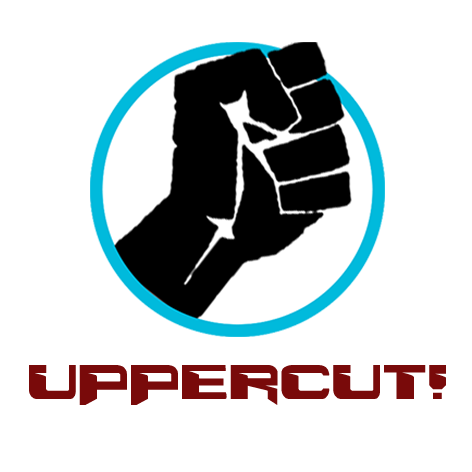
<style>
.page{position:relative;width:472px;height:472px;background:#ffffff}
.page>*{position:absolute;margin:0}
.t1{font:53.7px "Interdiction";color:#790a0a}
</style>
<div class="page">
<p class="t1" style="left:29px;top:365px;width:417px;height:40px">Uppercut!</p>
</div>
